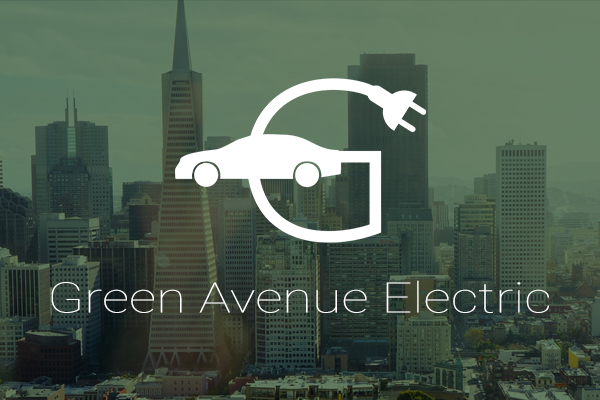
<style>
.page{position:relative;width:600px;height:400px}
.page>*{position:absolute;margin:0}
.t1{font:42.2px "Roboto-Thin";color:#ffffff;scale:1.28 1}
</style>
<div class="page">
<p class="t1" style="left:51px;top:280px;width:498px;height:33px">Green Avenue Electric</p>
</div>
